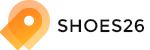
<style>
.page{position:relative;width:150px;height:50px;background:#ffffff}
.page>*{position:absolute;margin:0}
.t1{font:18px "Montserrat-Regular";letter-spacing:0.025em;color:#111111}
</style>
<div class="page">
<p class="t1" style="left:57px;top:19px;width:88px;height:14px">SHOES26</p>
</div>
